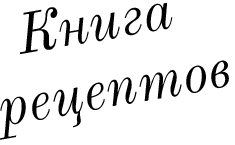
<style>
.page{position:relative;width:235px;height:145px;background:#ffffff}
.page>*{position:absolute;margin:0}
.t1{font:56.3px "OldStandardTT-Italic";color:#010101}
</style>
<div class="page">
<p class="t1" style="left:0px;top:2px;width:229px;height:138px;text-align:center;rotate:-10deg">Книга <br>рецептов</p>
</div>
